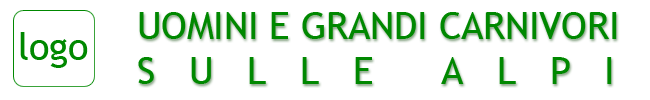
<style>
.page{position:relative;width:650px;height:100px;background:#ffffff}
.page>*{position:absolute;margin:0}
.t1{font:37.5px "TrebuchetMS";color:#008800}
</style>
<div class="page">
<p class="t1" style="left:138px;top:12px;width:479px;height:72px">UOMINI E GRANDI CARNIVORI<br>S   U   L   L   E      A   L   P   I</p>
<p class="t1" style="left:20px;top:32px;width:68px;height:36px">logo</p>
</div>
